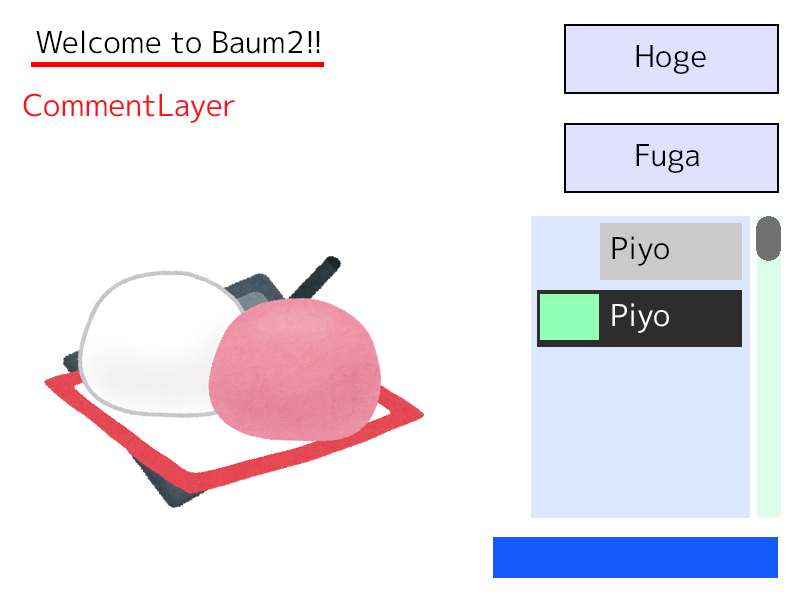
<style>
.page{position:relative;width:800px;height:600px;background:#ffffff}
.page>*{position:absolute;margin:0}
.t1{font:30px "mplus-2p-regular";color:#000000}
.t2{font:30px "mplus-2p-regular";color:#ffffff}
</style>
<div class="page">
<p class="t1" style="left:36px;top:30px;width:284px;height:24px">Welcome to Baum2!!</p>
<p class="t1" style="left:636px;top:45px;width:70px;height:29px">Hoge</p>
<p class="t1" style="left:636px;top:144px;width:63px;height:29px">Fuga</p>
<p class="t1" style="left:612px;top:236px;width:57px;height:30px">Piyo</p>
<p class="t2" style="left:612px;top:303px;width:57px;height:30px">Piyo</p>
</div>
